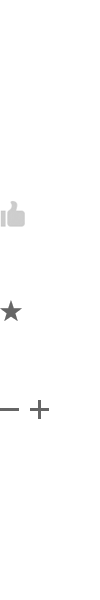
<style>
.page{position:relative;width:100px;height:600px;background:#ffffff}
.page>*{position:absolute;margin:0}
.t1{font:30px "FZZDXJW--GB1-0";color:#666666}
</style>
<div class="page">
<p class="t1" style="left:0px;top:300px;width:22px;height:21px">★</p>
</div>
